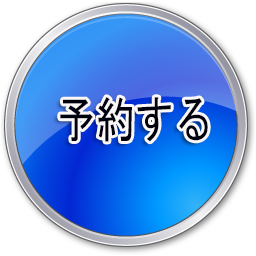
<style>
.page{position:relative;width:256px;height:256px}
.page>*{position:absolute;margin:0}
.t1{font:49.2px "MS-Gothic";color:#02020e;scale:0.79 1}
</style>
<div class="page">
<p class="t1" style="left:60px;top:97px;width:148px;height:45px">予約する</p>
</div>
